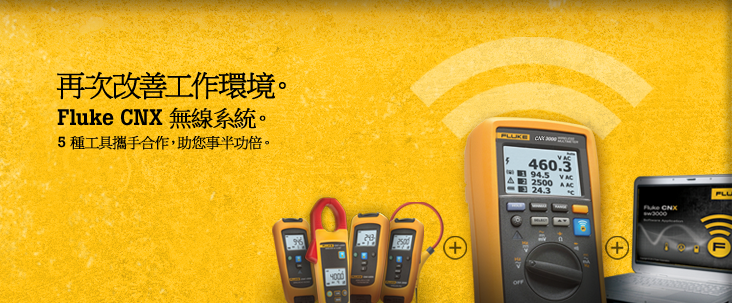
<style>
.page{position:relative;width:732px;height:303px}
.page>*{position:absolute;margin:0}
.t1{font:29px "MingLiU";letter-spacing:-0.005em;color:#000000;text-transform:uppercase;font-weight:bold}
.t2{font:14.5px "MingLiU";letter-spacing:-0.01em;color:#000000;font-weight:bold}
.t3{font:22.4px "BotonPro-Medium";letter-spacing:-0.01em;color:#000000}
.t4{font:22.4px "MingLiU";letter-spacing:-0.01em;color:#000000;font-weight:bold}
.t5{font:14.5px "BotonPro-Medium";letter-spacing:-0.01em;color:#000000}
</style>
<div class="page">
<p class="t1" style="left:56px;top:71px;width:230px;height:29px">再次改善工作環境。</p>
<p class="t2" style="left:57px;top:107px;width:212px;height:43px"><span class="t3">Fluke CNX </span><span class="t4">無線系統。<br></span><span class="t5">5 </span>種工具攜手合作，助您事半功倍。</p>
</div>
